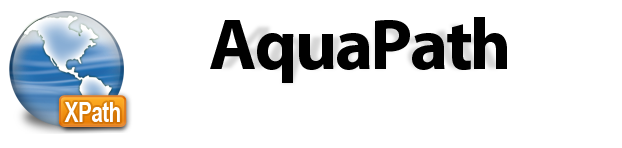
<style>
.page{position:relative;width:622px;height:148px;background:#ffffff}
.page>*{position:absolute;margin:0}
.t1{font:73.1px "Myriad-Bold";letter-spacing:-0.04em;color:#000000}
</style>
<div class="page">
<p class="t1" style="left:210px;top:17px;width:297px;height:66px">AquaPath</p>
</div>
